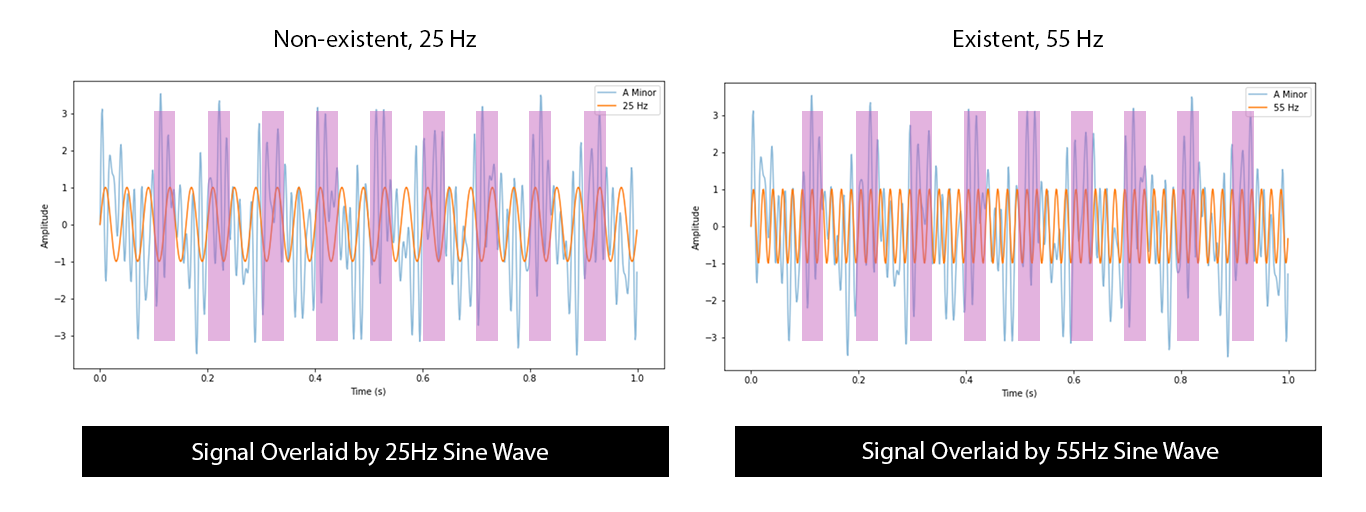
<style>
.page{position:relative;width:1366px;height:512px;background:#ffffff}
.page>*{position:absolute;margin:0}
.t1{font:25px "MyriadPro-Regular";color:#000000}
.t2{font:25px "MyriadPro-Regular";color:#ffffff}
</style>
<div class="page">
<p class="t1" style="left:275px;top:30px;width:201px;height:20px">Non-existent, 25 Hz</p>
<p class="t1" style="left:954px;top:30px;width:149px;height:20px">Existent, 55 Hz</p>
<p class="t2" style="left:192px;top:442px;width:356px;height:24px">Signal Overlaid by 25Hz Sine Wave</p>
<p class="t2" style="left:862px;top:441px;width:357px;height:24px">Signal Overlaid by 55Hz Sine Wave</p>
</div>
